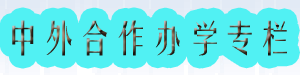
<style>
.page{position:relative;width:300px;height:75px;background:#51f1f3}
.page>*{position:absolute;margin:0}
.t1{font:36px "FZYTK--GBK1-0";letter-spacing:0.005em}
</style>
<div class="page">
<p class="t1" style="left:12px;top:20px;width:275px;height:36px">中外合作办学专栏</p>
</div>
